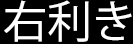
<style>
.page{position:relative;width:133px;height:44px;background:#000000}
.page>*{position:absolute;margin:0}
.t1{font:44px "KozGoPr6N-Regular";color:#ffffff}
</style>
<div class="page">
<p class="t1" style="left:4px;top:0px;width:128px;height:42px">右利き</p>
</div>
